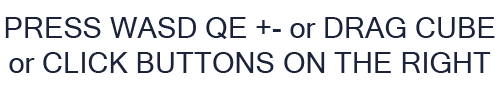
<style>
.page{position:relative;width:500px;height:85px;background:#ffffff}
.page>*{position:absolute;margin:0}
.t1{font:29.2px "MicrosoftSansSerif";color:#1b233a}
</style>
<div class="page">
<p class="t1" style="left:5px;top:17px;width:490px;height:56px;text-align:center">PRESS WASD QE +- or DRAG CUBE<br>or CLICK BUTTONS ON THE RIGHT</p>
</div>
